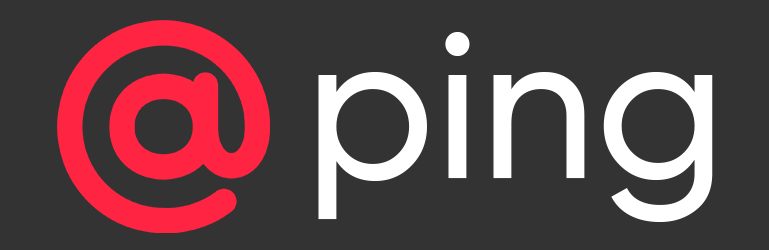
<style>
.page{position:relative;width:769px;height:250px;background:#333333}
.page>*{position:absolute;margin:0}
.t1{font:205.3px "Gilroy-Medium";color:#ffffff}
</style>
<div class="page">
<p class="t1" style="left:318px;top:32px;width:395px;height:190px">ping</p>
</div>
